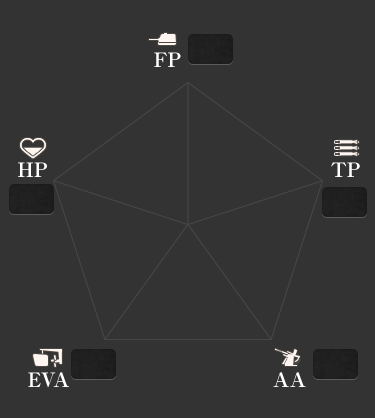
<style>
.page{position:relative;width:375px;height:418px;background:#333333}
.page>*{position:absolute;margin:0}
.t1{font:20px "RyuminPro-ExBold";color:#ffffff}
</style>
<div class="page">
<p class="t1" style="left:154px;top:52px;width:27px;height:15px">FP</p>
<p class="t1" style="left:18px;top:162px;width:29px;height:15px">HP</p>
<p class="t1" style="left:331px;top:162px;width:29px;height:15px">TP</p>
<p class="t1" style="left:28px;top:372px;width:41px;height:16px">EVA</p>
<p class="t1" style="left:273px;top:372px;width:33px;height:15px">AA</p>
</div>
